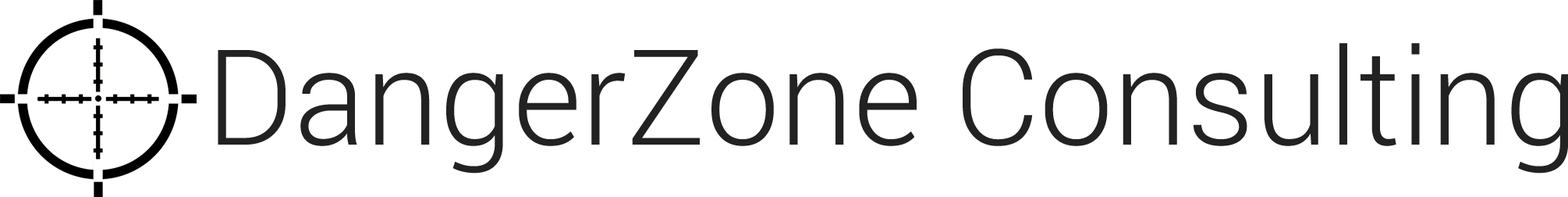
<style>
.page{position:relative;width:1568px;height:197px;background:#ffffff}
.page>*{position:absolute;margin:0}
.t1{font:132.6px "Roboto-Light";color:#222222}
</style>
<div class="page">
<p class="t1" style="left:218px;top:43px;width:1350px;height:130px">DangerZone Consulting</p>
</div>
